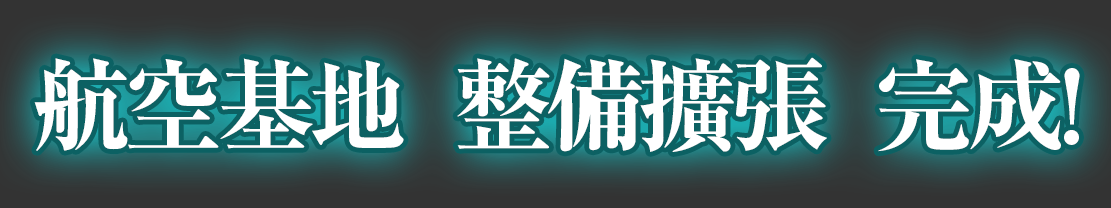
<style>
.page{position:relative;width:1111px;height:208px}
.page>*{position:absolute;margin:0}
.t1{font:100px "RyuminPr6N-ExBold";letter-spacing:-0.075em;color:#ffffff}
</style>
<div class="page">
<p class="t1" style="left:34px;top:57px;width:1046px;height:95px">航空基地  整備擴張  完成!</p>
</div>
